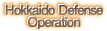
<style>
.page{position:relative;width:107px;height:31px}
.page>*{position:absolute;margin:0}
.t1{font:13px/12px "FutoGoB101Pr5-Bold";letter-spacing:-0.08em;font-weight:bold}
.t2{font:13px/12px "FutoGoB101Pr5-Bold";letter-spacing:-0.08em;color:#79634c;font-weight:bold}
</style>
<div class="page">
<p class="t1" style="left:4px;top:3px;width:98px;height:25px;text-align:center">Hokkaido Defense<br>Operation</p>
<p class="t2" style="left:5px;top:4px;width:98px;height:25px;text-align:center">Hokkaido Defense<br>Operation</p>
</div>
